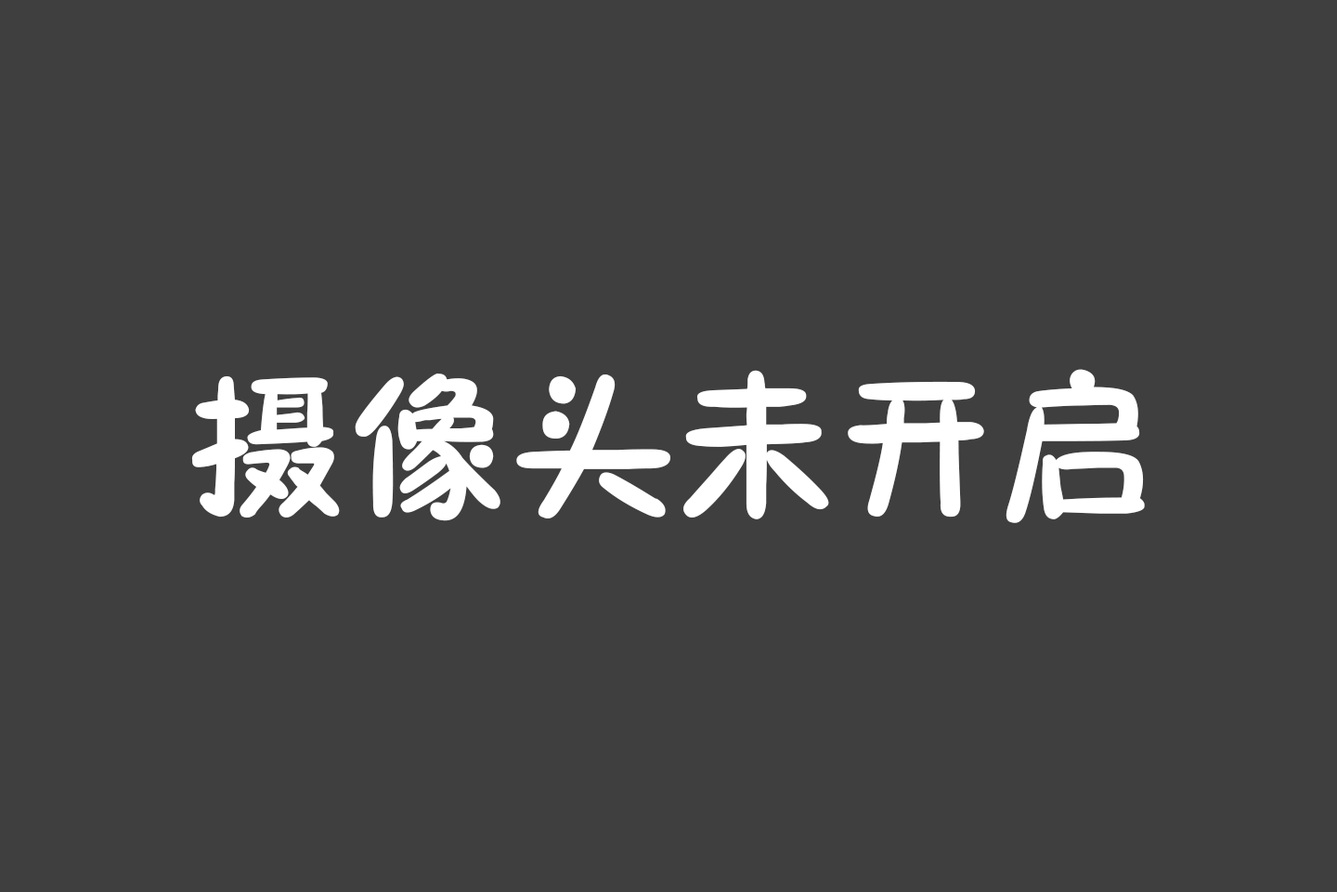
<style>
.page{position:relative;width:1337px;height:892px;background:#3f3f3f}
.page>*{position:absolute;margin:0}
.t1{font:162.5px "FZSEJW--GB1-0";color:#ffffff}
</style>
<div class="page">
<p class="t1" style="left:191px;top:369px;width:954px;height:154px">摄像头未开启</p>
</div>
